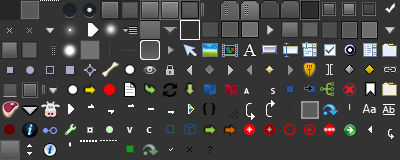
<style>
.page{position:relative;width:400px;height:160px;background:#333333}
.page>*{position:absolute;margin:0}
.t1{font:8px "MyriadPro-Regular";color:#ffffff}
.t2{font:14px "SegoeUI-Bold";color:#000000}
.t3{font:12px "LaoUI";color:#ffffff}
.t4{font:10px "LaoUI";color:#ffffff}
.t5{font:8px "Ebrima-Bold";color:#ffffff}
</style>
<div class="page">
<p class="t1" style="left:244px;top:88px;width:5px;height:6px">A</p>
<p class="t1" style="left:271px;top:88px;width:4px;height:6px">S</p>
<p class="t2" style="left:202px;top:103px;width:14px;height:12px">{ }</p>
<p class="t3" style="left:362px;top:104px;width:14px;height:9px">Aa</p>
<p class="t4" style="left:382px;top:106px;width:13px;height:7px">Ab</p>
<p class="t5" style="left:127px;top:127px;width:6px;height:6px">V</p>
<p class="t5" style="left:146px;top:127px;width:6px;height:6px">C</p>
</div>
